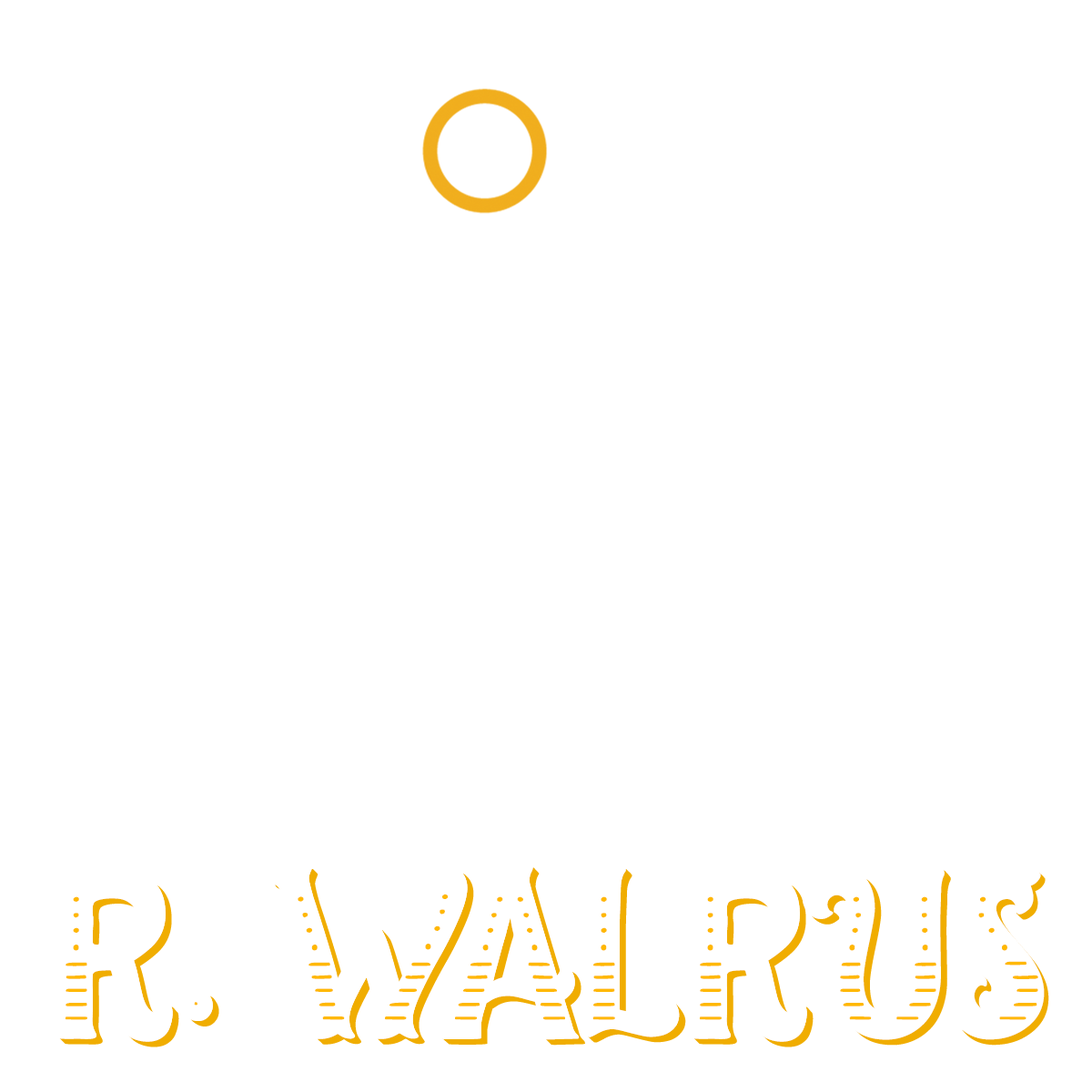
<style>
.page{position:relative;width:1092px;height:1092px;background:#ffffff}
.page>*{position:absolute;margin:0}
.t1{font:178.2px "TheSalvador-Shadow";color:#f0ad00;text-transform:uppercase}
.t2{font:178.2px "TheSalvador-Shadow";letter-spacing:-0.14em;color:#f0ad00;text-transform:uppercase}
.t3{font:178.2px "TheSalvador-Shadow";letter-spacing:0.02em;color:#f0ad00;text-transform:uppercase}
.t4{font:178.2px "TheSalvador-Shadow";letter-spacing:0.04em;color:#f0ad00;text-transform:uppercase}
.t5{font:178.2px "TheSalvador-Dotted-Line";color:#ffb800;text-transform:uppercase}
.t6{font:178.2px "TheSalvador-Dotted-Line";letter-spacing:-0.14em;color:#ffb800;text-transform:uppercase}
.t7{font:178.2px "TheSalvador-Dotted-Line";letter-spacing:0.02em;color:#ffb800;text-transform:uppercase}
.t8{font:178.2px "TheSalvador-Dotted-Line";letter-spacing:0.04em;color:#ffb800;text-transform:uppercase}
</style>
<div class="page">
<p class="t1" style="left:59px;top:867px;width:990px;height:180px">R. <span class="t2">W</span><span class="t3">a</span>l<span class="t4">ru</span>s</p>
<p class="t5" style="left:66px;top:894px;width:972px;height:126px">R. <span class="t6">W</span><span class="t7">a</span>l<span class="t8">ru</span>s</p>
</div>
